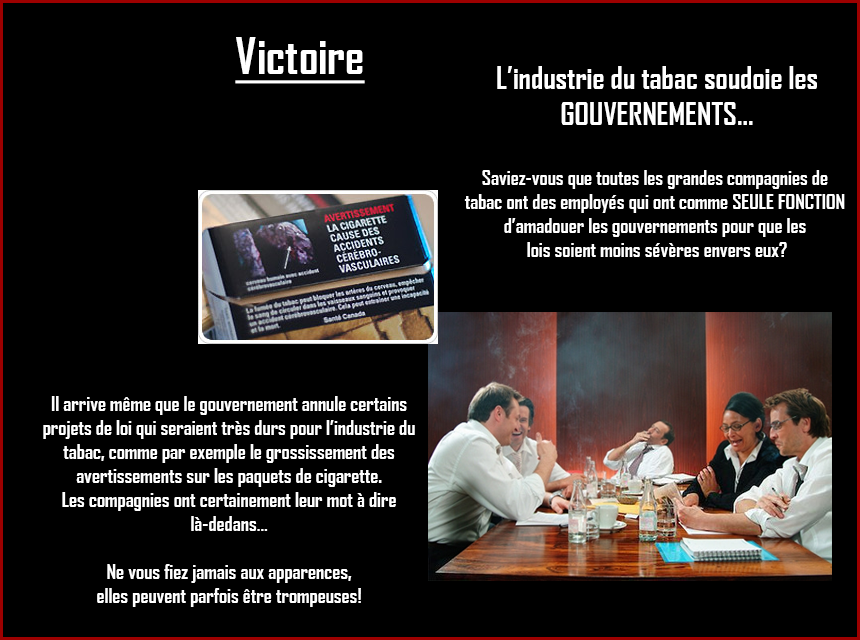
<style>
.page{position:relative;width:860px;height:640px;background:#000000}
.page>*{position:absolute;margin:0}
.t1{font:48px "AgencyFB-Bold";color:#ffffff;text-decoration:underline}
.t2{font:20px "AgencyFB-Bold";color:#ffffff}
.t3{font:30px "AgencyFB-Bold";color:#ffffff}
</style>
<div class="page">
<p class="t1" style="left:235px;top:37px;width:130px;height:47px">Victoire</p>
<p class="t2" style="left:464px;top:66px;width:381px;height:191px;text-align:center"><span class="t3">L’industrie du tabac soudoie les<br>GOUVERNEMENTS...<br><br></span>Saviez-vous que toutes les grandes compagnies de <br>tabac ont des employés qui ont comme SEULE FONCTION <br>d’amadouer les gouvernements pour que les <br>lois soient moins sévères envers eux?</p>
<p class="t2" style="left:43px;top:396px;width:372px;height:211px;text-align:center">Il arrive même que le gouvernement annule certains <br>projets de loi qui seraient très durs pour l’industrie du tabac, comme par exemple le grossissement des <br>avertissements sur les paquets de cigarette. <br>Les compagnies ont certainement leur mot à dire <br>là-dedans…<br><br>Ne vous fiez jamais aux apparences, <br>elles peuvent parfois être trompeuses!</p>
</div>
